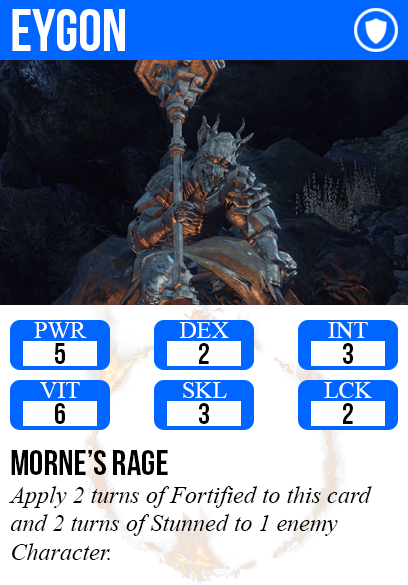
<style>
.page{position:relative;width:408px;height:585px;background:#ffffff}
.page>*{position:absolute;margin:0}
.t1{font:60px "BebasNeue";color:#ffffff}
.t2{font:24px "TimesNewRomanPSMT";color:#ffffff}
.t3{font:30px "BebasNeue";color:#000000}
.t4{font:36px "BebasNeue";color:#000000}
.t5{font:24px "TimesNewRomanPS-ItalicMT";color:#000000}
</style>
<div class="page">
<p class="t1" style="left:12px;top:9px;width:113px;height:42px">eygon</p>
<p class="t2" style="left:34px;top:322px;width:53px;height:16px">PWR</p>
<p class="t2" style="left:179px;top:322px;width:50px;height:16px">DEX</p>
<p class="t2" style="left:328px;top:322px;width:40px;height:17px">INT</p>
<p class="t3" style="left:55px;top:343px;width:10px;height:21px">5</p>
<p class="t3" style="left:199px;top:343px;width:10px;height:21px">2</p>
<p class="t3" style="left:343px;top:343px;width:10px;height:21px">3</p>
<p class="t2" style="left:40px;top:382px;width:40px;height:16px">VIT</p>
<p class="t2" style="left:183px;top:382px;width:44px;height:16px">SKL</p>
<p class="t2" style="left:324px;top:382px;width:48px;height:16px">LCK</p>
<p class="t3" style="left:55px;top:403px;width:10px;height:21px">6</p>
<p class="t3" style="left:199px;top:403px;width:10px;height:21px">3</p>
<p class="t3" style="left:343px;top:403px;width:10px;height:21px">2</p>
<p class="t4" style="left:11px;top:450px;width:157px;height:25px">morne’s rage</p>
<p class="t5" style="left:9px;top:486px;width:363px;height:74px">Apply 2 turns of Fortified to this card<br>and 2 turns of Stunned to 1 enemy<br>Character.</p>
</div>
